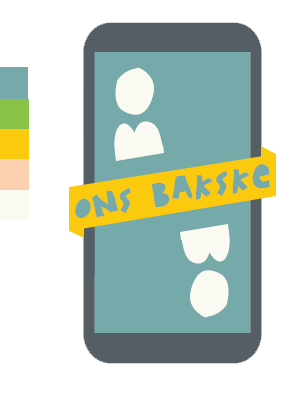
<style>
.page{position:relative;width:300px;height:394px;background:#ffffff}
.page>*{position:absolute;margin:0}
.t1{font:24px "woodcutterMMXII";color:#76a9aa}
.t2{font:34px "woodcutterMMXII";color:#76a9aa}
</style>
<div class="page">
<p class="t1" style="left:75px;top:164px;width:195px;height:54px;rotate:-10deg">ONS B<span class="t2">a</span>KSKE</p>
</div>
